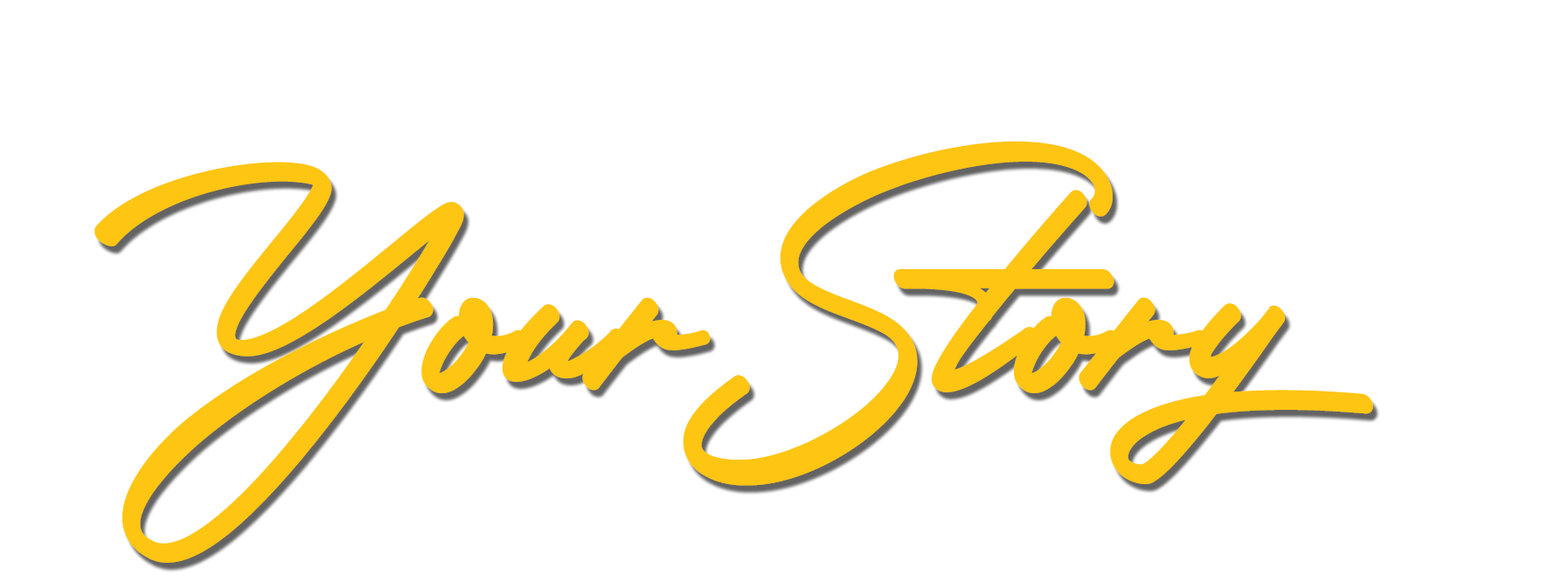
<style>
.page{position:relative;width:1568px;height:582px;background:#ffffff}
.page>*{position:absolute;margin:0}
.t1{font:315.1px "PhotographSignature";color:#ffc513;font-weight:bold;font-style:italic}
</style>
<div class="page">
<p class="t1" style="left:94px;top:141px;width:1279px;height:422px">YourStory</p>
</div>
